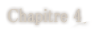
<style>
.page{position:relative;width:104px;height:31px;background:#ffffff}
.page>*{position:absolute;margin:0}
.t1{font:19px "MS-PMincho";color:#d6cdc1;font-weight:bold;scale:0.84 1}
</style>
<div class="page">
<p class="t1" style="left:8px;top:8px;width:74px;height:17px">Chapitre 4</p>
</div>
